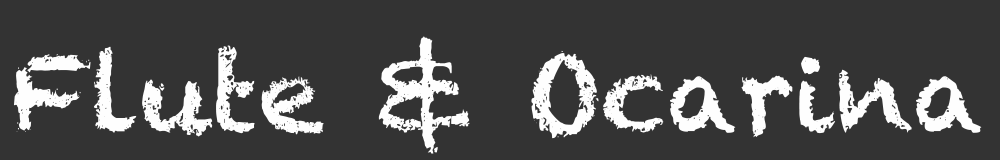
<style>
.page{position:relative;width:1000px;height:160px;background:#333333}
.page>*{position:absolute;margin:0}
.t1{font:105px "Chalkduster";color:#fefefe}
</style>
<div class="page">
<p class="t1" style="left:13px;top:36px;width:969px;height:118px">Flute &amp; Ocarina</p>
</div>
